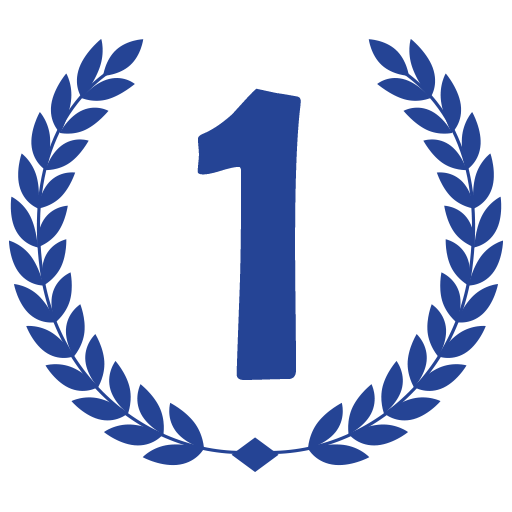
<style>
.page{position:relative;width:512px;height:512px;background:#ffffff}
.page>*{position:absolute;margin:0}
.t1{font:115.6px "BerlinSansFB-Reg";color:#254495}
</style>
<div class="page">
<p class="t1" style="left:197px;top:88px;width:104px;height:292px;text-align:center">1</p>
</div>
